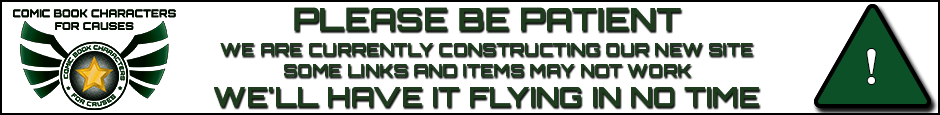
<style>
.page{position:relative;width:940px;height:115px;background:#ffffff}
.page>*{position:absolute;margin:0}
.t1{font:31.2px "Orbitron-Medium";color:#1f3c1e;text-transform:uppercase;font-weight:bold}
.t2{font:17px "Orbitron-Medium";color:#1f3c1e;text-transform:uppercase;font-weight:bold}
.t3{font:53.4px "BellMTBold";color:#ffffff}
.t4{font:26.6px "Orbitron-Medium";color:#1f3c1e;text-transform:uppercase;font-weight:bold}
</style>
<div class="page">
<p class="t1" style="left:294px;top:7px;width:387px;height:24px">Please be patient</p>
<p class="t2" style="left:220px;top:43px;width:533px;height:34px;text-align:center">we are currently constructing our new site<br>Some links and items may not work</p>
<p class="t3" style="left:867px;top:49px;width:9px;height:35px">!</p>
<p class="t4" style="left:214px;top:87px;width:545px;height:20px">we'll have it Flying in no time</p>
</div>
